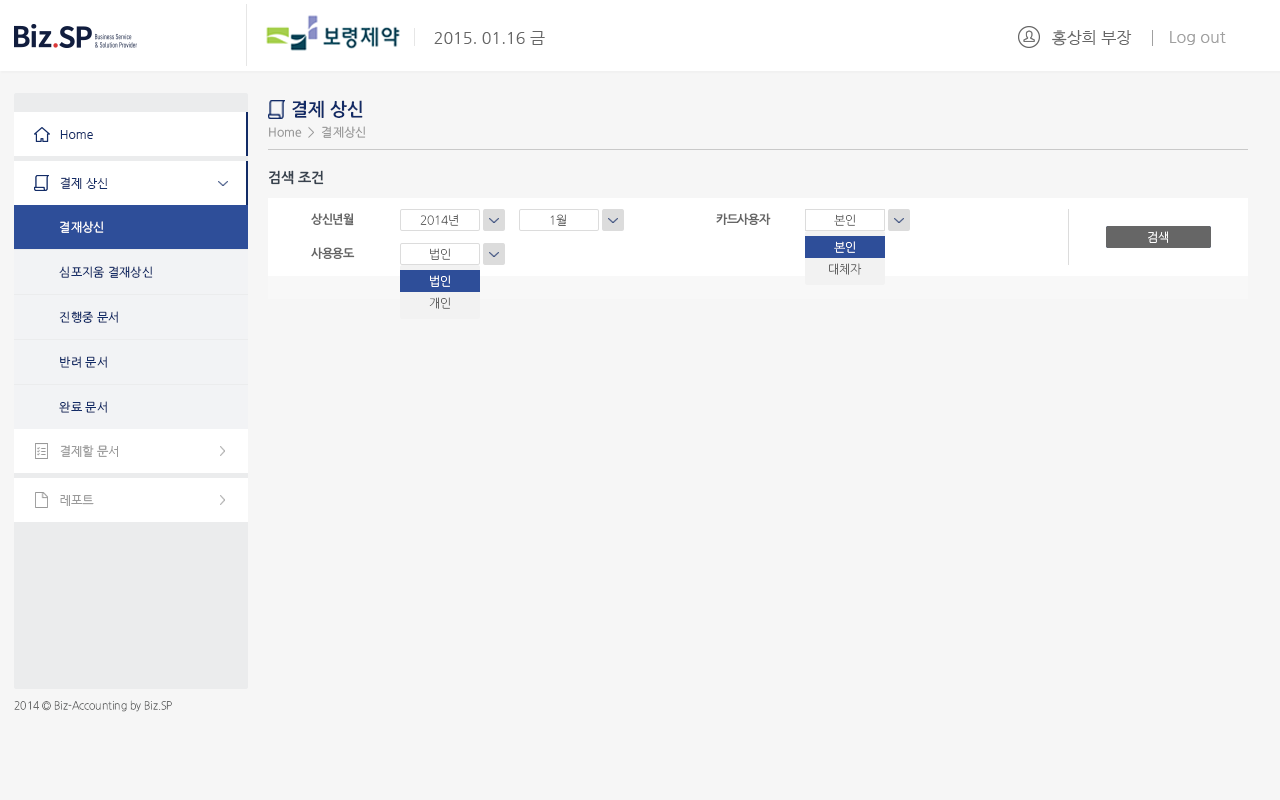
<style>
.page{position:relative;width:1280px;height:800px;background:#f6f6f6}
.page>*{position:absolute;margin:0}
.t1{font:16px "NanumGothic";color:#666666}
.t2{font:16px "NanumGothic";color:#a0a0a0}
.t3{font:18px "NanumGothicOTFBold";color:#122b66}
.t4{font:12px "NanumGothicOTF";color:#999999}
.t5{font:12px "NanumGothic";color:#122b66}
.t6{font:14px "NanumGothicOTFBold";color:#38424e}
.t7{font:12px "NanumGothicOTF";color:#ffffff}
.t8{font:12px "NanumGothicOTFBold";letter-spacing:-0.025em;color:#666666}
.t9{font:12px "NanumGothicOTFLight";letter-spacing:-0.025em;color:#666666}
.t10{font:12px "NanumGothicOTFLight";letter-spacing:-0.025em;color:#ffffff}
.t11{font:12px "NanumGothicOTFLight";letter-spacing:-0.025em;color:#fffefe}
.t12{font:12px "NanumGothicOTF";color:#122b66}
.t13{font:12px "NanumGothic";color:#999999}
.t14{font:11px "NanumGothicOTFLight";color:#6c6d6d;scale:0.94 1}
</style>
<div class="page">
<p class="t1" style="left:1052px;top:30px;width:80px;height:16px">홍상희 부장</p>
<p class="t1" style="left:434px;top:31px;width:111px;height:14px">2015. 01.16 금</p>
<p class="t2" style="left:1170px;top:31px;width:56px;height:14px">Log out</p>
<p class="t3" style="left:292px;top:100px;width:71px;height:18px">결제 상신</p>
<p class="t4" style="left:269px;top:126px;width:97px;height:12px">Home  &gt;  결제상신</p>
<p class="t5" style="left:60px;top:130px;width:33px;height:9px">Home</p>
<p class="t5" style="left:60px;top:130px;width:33px;height:9px">Home</p>
<p class="t6" style="left:269px;top:170px;width:55px;height:15px">검색 조건</p>
<p class="t5" style="left:60px;top:177px;width:48px;height:12px">결제 상신</p>
<p class="t7" style="left:60px;top:221px;width:44px;height:12px">결재상신</p>
<p class="t8" style="left:311px;top:213px;width:43px;height:13px">상신년월</p>
<p class="t9" style="left:420px;top:214px;width:39px;height:12px">2014년</p>
<p class="t9" style="left:550px;top:214px;width:16px;height:12px">1월</p>
<p class="t8" style="left:716px;top:213px;width:55px;height:12px">카드사용자</p>
<p class="t9" style="left:834px;top:214px;width:21px;height:12px">본인</p>
<p class="t10" style="left:1148px;top:231px;width:20px;height:12px">검색</p>
<p class="t10" style="left:1148px;top:231px;width:20px;height:12px">검색</p>
<p class="t11" style="left:834px;top:241px;width:21px;height:12px">본인</p>
<p class="t8" style="left:311px;top:247px;width:44px;height:12px">사용용도</p>
<p class="t9" style="left:430px;top:248px;width:20px;height:12px">법인</p>
<p class="t12" style="left:59px;top:266px;width:94px;height:12px">심포지움 결재상신</p>
<p class="t9" style="left:829px;top:263px;width:33px;height:12px">대체자</p>
<p class="t10" style="left:430px;top:275px;width:20px;height:12px">법인</p>
<p class="t9" style="left:429px;top:297px;width:21px;height:12px">개인</p>
<p class="t12" style="left:59px;top:311px;width:59px;height:12px">진행중 문서</p>
<p class="t12" style="left:60px;top:356px;width:47px;height:12px">반려 문서</p>
<p class="t12" style="left:59px;top:401px;width:48px;height:12px">완료 문서</p>
<p class="t13" style="left:60px;top:445px;width:58px;height:12px">결제할 문서</p>
<p class="t13" style="left:60px;top:445px;width:58px;height:12px">결제할 문서</p>
<p class="t13" style="left:60px;top:495px;width:34px;height:11px">레포트</p>
<p class="t13" style="left:60px;top:495px;width:34px;height:11px">레포트</p>
<p class="t14" style="left:14px;top:700px;width:158px;height:12px">2014 © Biz-Accounting by Biz.SP</p>
</div>
